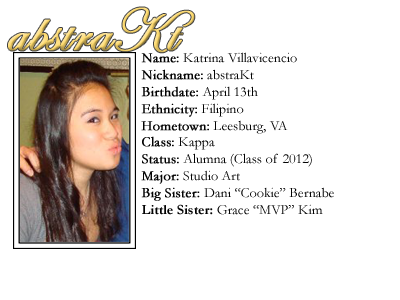
<style>
.page{position:relative;width:400px;height:300px;background:#ffffff}
.page>*{position:absolute;margin:0}
.t1{font:14px "Garamond";color:#000000}
.t2{font:14px "Garamond";color:#000000;font-weight:bold}
.t3{font:14px "Garamond-Bold";color:#000000}
</style>
<div class="page">
<p class="t1" style="left:141px;top:52px;width:193px;height:163px"><span class="t2">Name:</span> Katrina Villavicencio<br><span class="t2">Nickname:</span> abstraKt<br><span class="t2">Birthdate:</span> April 13th<br><span class="t2">Ethnicity:</span> Filipino<br><span class="t2">Hometown:</span> Leesburg, VA<br><span class="t2">Class:</span> Kappa<br><span class="t2">Status:</span> Alumna (Class of 2012) <br><span class="t2">Major:</span> Studio Art<br><span class="t2">Big Sister: </span>Dani “Cookie” Bernabe<br><span class="t3">Little Sister: </span>Grace “MVP” Kim</p>
</div>
